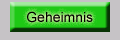
<style>
.page{position:relative;width:120px;height:40px;background:#c6c3c6}
.page>*{position:absolute;margin:0}
.t1{font:14px "ArialMT";color:#000000}
</style>
<div class="page">
<p class="t1" style="left:27px;top:11px;width:66px;height:12px">Geheimnis</p>
</div>
